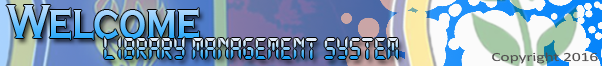
<style>
.page{position:relative;width:602px;height:66px}
.page>*{position:absolute;margin:0}
.t1{font:50px "CopperplateGothic-Bold";letter-spacing:-0.005em;scale:0.75 1}
.t2{font:33.3px "LCD";letter-spacing:-0.005em;scale:0.75 1}
.t3{font:12.4px "Calibri";letter-spacing:-0.005em;color:#504e4e;scale:1.4 1}
</style>
<div class="page">
<p class="t1" style="left:6px;top:5px;width:194px;height:35px">Welcome</p>
<p class="t2" style="left:104px;top:36px;width:294px;height:23px">Library Management System</p>
<p class="t3" style="left:492px;top:52px;width:106px;height:12px">Copyright 2016</p>
</div>
